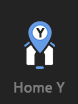
<style>
.page{position:relative;width:78px;height:104px;background:#232323}
.page>*{position:absolute;margin:0}
.t1{font:12px "Arial-BoldMT";color:#232323;font-weight:bold}
.t2{font:14px "SegoeUI";color:#7c7c7c;font-weight:bold}
</style>
<div class="page">
<p class="t1" style="left:36px;top:28px;width:9px;height:10px">Y</p>
<p class="t2" style="left:14px;top:82px;width:51px;height:11px">Home Y</p>
</div>
